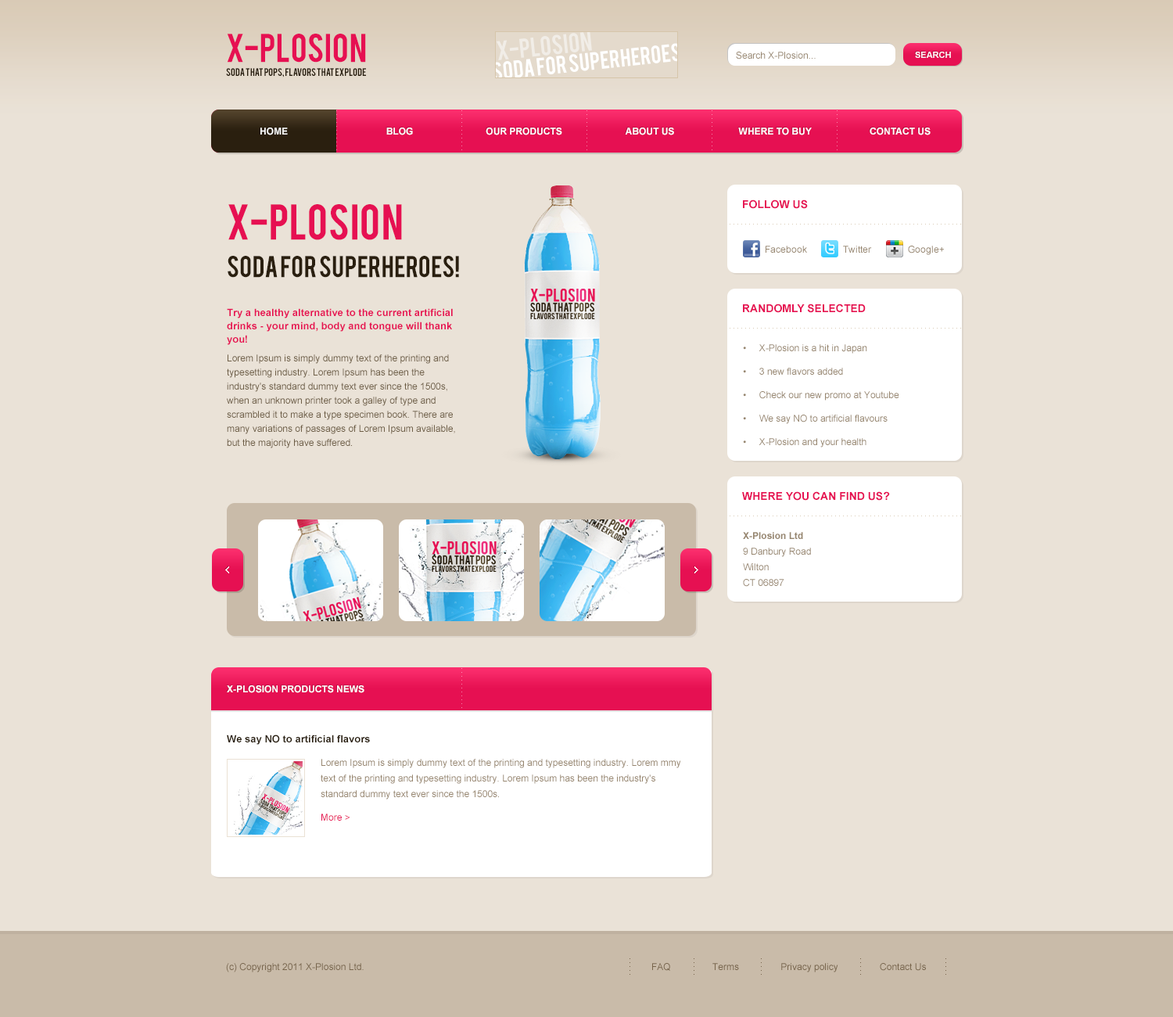
<style>
.page{position:relative;width:1173px;height:1017px;background:#eae2d7}
.page>*{position:absolute;margin:0}
.t1{font:31.3px "Bebas";color:#e61052;text-transform:uppercase}
.t2{font:9.4px "ArialMT";color:#97866f}
.t3{font:8.6px "Arial-BoldMT";color:#ffffff;text-transform:uppercase}
.t4{font:8.6px "Bebas";color:#2a1f0f;text-transform:uppercase}
.t5{font:9.4px "Arial-BoldMT";color:#ffffff;text-transform:uppercase}
.t6{font:39.1px "Bebas";color:#e61052;text-transform:uppercase}
.t7{font:10.9px "Arial-BoldMT";color:#e61052;text-transform:uppercase}
.t8{font:23.5px "Bebas";color:#2a1f0f;text-transform:uppercase}
.t9{font:9.4px/14.1px "ArialMT";color:#6e5e46}
.t10{font:10.2px/13.3px "Arial-BoldMT";color:#e61052}
.t11{font:9.4px/18.8px "ArialMT";color:#6e5e46}
.t12{font:9.4px/12.5px "ArialMT";color:#6e5e46}
.t13{font:9.4px/23.5px "ArialMT";color:#97866f}
.t14{font:9.4px/15.6px "ArialMT";color:#97866f}
.t15{font:9.4px/15.6px "Arial-BoldMT";color:#97866f}
.t16{font:10.2px/23.5px "Arial-BoldMT";color:#2a1f0f}
.t17{font:9.4px/23.5px "ArialMT";color:#e61052}
.t18{font:9.4px "ArialMT";color:#77644b}
</style>
<div class="page">
<p class="t1" style="left:227px;top:34px;width:139px;height:29px">X-Plosion</p>
<p class="t2" style="left:736px;top:52px;width:80px;height:7px">Search X-Plosion...</p>
<p class="t3" style="left:915px;top:52px;width:36px;height:6px">Search</p>
<p class="t4" style="left:226px;top:68px;width:140px;height:9px">soda that pops, flavors that explode</p>
<p class="t5" style="left:260px;top:127px;width:28px;height:8px">Home</p>
<p class="t5" style="left:386px;top:127px;width:27px;height:8px">Blog</p>
<p class="t5" style="left:486px;top:127px;width:76px;height:8px">Our products</p>
<p class="t5" style="left:625px;top:127px;width:49px;height:8px">About Us</p>
<p class="t5" style="left:738px;top:127px;width:74px;height:8px">Where to buy</p>
<p class="t5" style="left:870px;top:127px;width:61px;height:8px">Contact Us</p>
<p class="t6" style="left:228px;top:204px;width:174px;height:36px">X-Plosion</p>
<p class="t7" style="left:743px;top:199px;width:65px;height:10px">Follow us</p>
<p class="t2" style="left:766px;top:246px;width:41px;height:7px">Facebook</p>
<p class="t2" style="left:843px;top:246px;width:29px;height:7px">Twitter</p>
<p class="t2" style="left:908px;top:246px;width:36px;height:9px">Google+</p>
<p class="t8" style="left:228px;top:256px;width:231px;height:22px">soda for superheroes!</p>
<p class="t7" style="left:743px;top:303px;width:123px;height:10px">Randomly selected</p>
<p class="t9" style="left:227px;top:308px;width:228px;height:140px"><span class="t10">Try a healthy alternative to the current artificial drinks - your mind, body and tongue will thank you!<br></span><span class="t11">Lorem I</span><span class="t12">psum is sim</span>ply dummy text of the printing and typesetting industry. Lorem Ipsum has been the industry's standard dummy text ever since the 1500s, when an unknown printer took a galley of type and scrambled it to make a type specimen book. There are many variations of passages of Lorem Ipsum available, but the majority have suffered.</p>
<p class="t13" style="left:743px;top:344px;width:156px;height:103px">•     X-Plosion is a hit in Japan<br>•     3 new flavors added<br>•     Check our new promo at Youtube<br>•     We say NO to artificial flavours<br>•     X-Plosion and your health</p>
<p class="t7" style="left:742px;top:491px;width:148px;height:9px">where you can find us?</p>
<p class="t14" style="left:743px;top:532px;width:68px;height:54px"><span class="t15">X-Plosion Ltd<br></span>9 Danbury Road<br>Wilton<br>CT 06897</p>
<p class="t5" style="left:227px;top:685px;width:137px;height:8px">X-Plosion products News</p>
<p class="t14" style="left:227px;top:734px;width:454px;height:86px"><span class="t16">We say NO to artificial flavors<br></span><span class="t13">Lorem </span>Ipsum is simply dummy text of the printing and typesetting industry. Lorem mmy text of the printing and typesetting industry. Lorem Ipsum has been the industry's standard dummy text ever since the 1500s.<br><span class="t17">More &gt;</span></p>
<p class="t18" style="left:226px;top:963px;width:138px;height:9px">(c) Copyright 2011 X-Plosion Ltd.</p>
<p class="t18" style="left:652px;top:963px;width:274px;height:9px">FAQ                Terms                Privacy policy                Contact Us</p>
</div>
